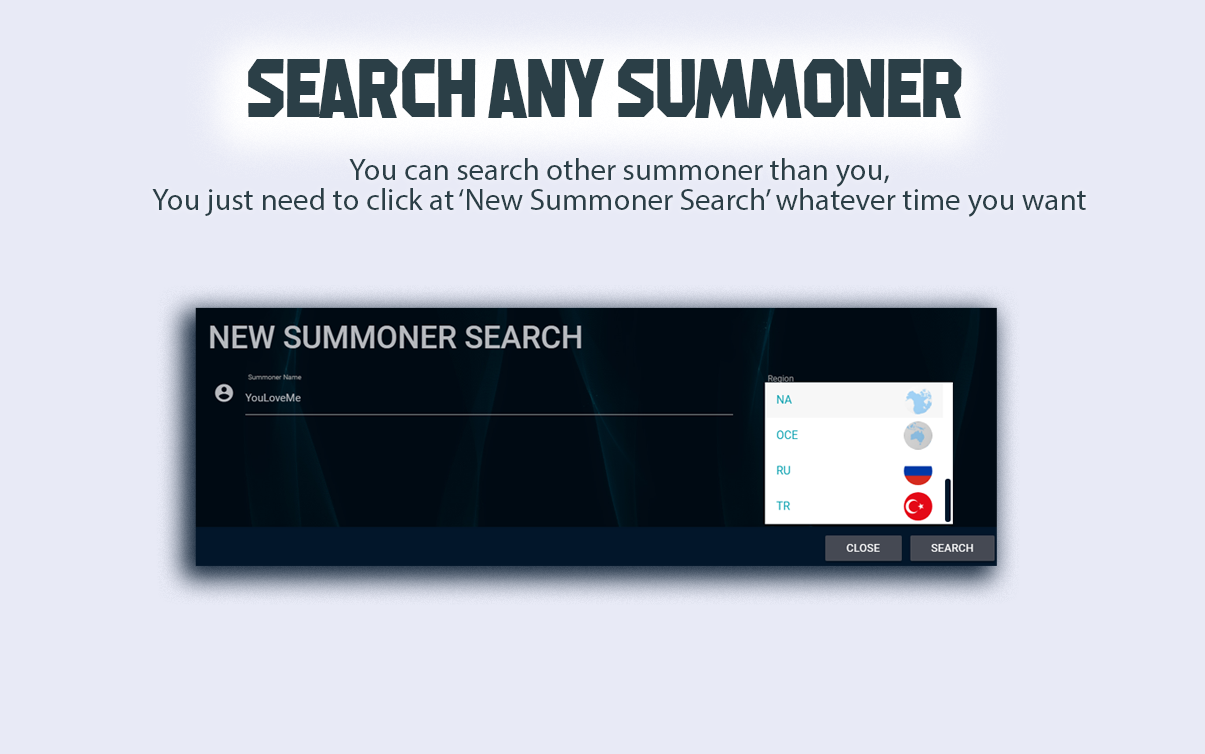
<style>
.page{position:relative;width:1205px;height:754px;background:#e8eaf6}
.page>*{position:absolute;margin:0}
.t1{font:82.1px "MachineGunk";color:#2b3f47}
.t2{font:30.9px/30px "MyriadPro-Regular";color:#2b3f47}
</style>
<div class="page">
<p class="t1" style="left:248px;top:59px;width:714px;height:60px">SEARCH ANY SUMMONER</p>
<p class="t2" style="left:152px;top:158px;width:934px;height:59px;text-align:center">You can search other summoner than you,<br>You just need to click at ‘New Summoner Search’ whatever time you want</p>
</div>
